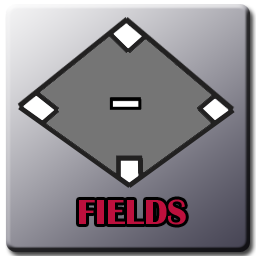
<style>
.page{position:relative;width:256px;height:256px;background:#757575}
.page>*{position:absolute;margin:0}
.t1{font:36px "BritannicBold";color:#bd103d}
</style>
<div class="page">
<p class="t1" style="left:79px;top:199px;width:107px;height:26px">FIELDS</p>
</div>
